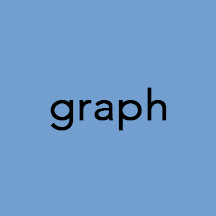
<style>
.page{position:relative;width:216px;height:216px;background:#729fcf}
.page>*{position:absolute;margin:0}
.t1{font:43.8px "Avenir-Light";color:#000000;font-weight:bold}
</style>
<div class="page">
<p class="t1" style="left:50px;top:87px;width:117px;height:44px">graph</p>
</div>
